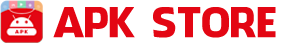
<style>
.page{position:relative;width:292px;height:44px;background:#ffffff}
.page>*{position:absolute;margin:0}
.t1{font:40px "FacebookLetterFaces";color:#e30613;text-transform:uppercase}
</style>
<div class="page">
<p class="t1" style="left:53px;top:7px;width:223px;height:31px">APK sTORE</p>
</div>
